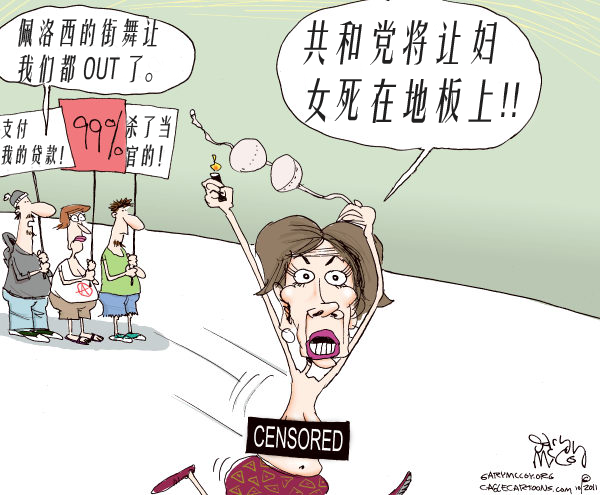
<style>
.page{position:relative;width:600px;height:495px;background:#ffffff}
.page>*{position:absolute;margin:0}
.t1{font:28.7px "FZYTK--GBK1-0";color:#201f1f;font-style:italic;scale:0.72 1}
.t2{font:46px/58.3px "FZYTK--GBK1-0";color:#201f1f;font-style:italic;scale:0.72 1}
.t3{font:20.1px "FZYTK--GBK1-0";color:#201f1f;font-style:italic;scale:0.72 1}
.t4{font:23px "FZYTK--GBK1-0";color:#201f1f;font-style:italic;scale:0.72 1}
</style>
<div class="page">
<p class="t1" style="left:17px;top:18px;width:142px;height:65px">佩洛西的街舞让<br>我们都 OUT 了。</p>
<p class="t2" style="left:303px;top:20px;width:217px;height:103px">共和党将让妇<br>女死在地板上!!</p>
<p class="t3" style="left:1px;top:118px;width:63px;height:47px">支付<br>我的贷款！</p>
<p class="t4" style="left:125px;top:115px;width:47px;height:53px">杀了当<br>官的！</p>
</div>
